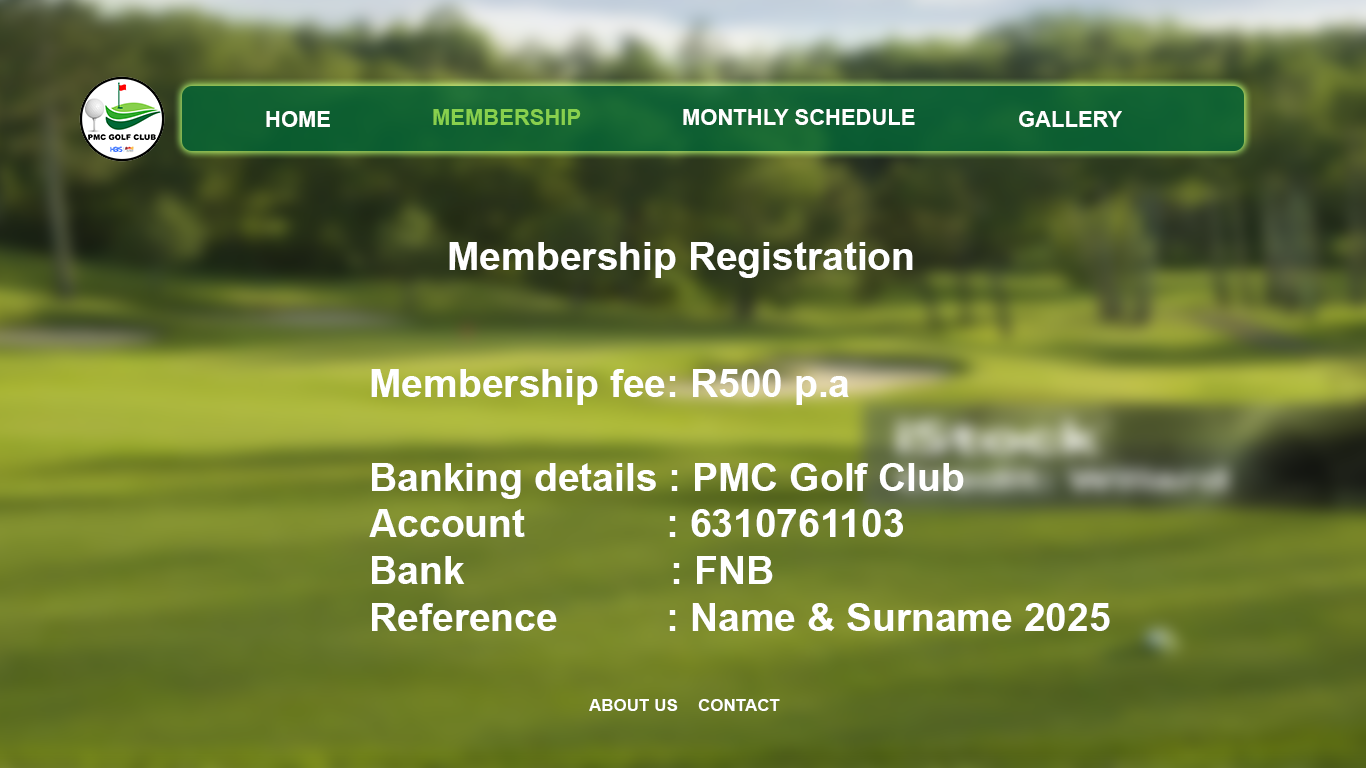
<style>
.page{position:relative;width:1366px;height:768px}
.page>*{position:absolute;margin:0}
.t1{font:22px "Arial-BoldMT";color:#ffffff}
.t2{font:22px "Arial-BoldMT";color:#88d04d}
.t3{font:39px "Arial-BoldMT";color:#ffffff}
.t4{font:17px "Arial-BoldMT";color:#ffffff}
</style>
<div class="page">
<p class="t1" style="left:266px;top:111px;width:64px;height:16px">HOME</p>
<p class="t2" style="left:433px;top:109px;width:148px;height:16px">MEMBERSHIP</p>
<p class="t1" style="left:683px;top:109px;width:232px;height:16px">MONTHLY SCHEDULE</p>
<p class="t1" style="left:1019px;top:111px;width:103px;height:16px">GALLERY</p>
<p class="t3" style="left:449px;top:242px;width:464px;height:36px">Membership Registration</p>
<p class="t3" style="left:369px;top:369px;width:741px;height:262px">Membership fee: R500 p.a<br><br>Banking details : PMC Golf Club<br>Account             : 6310761103<br>Bank                   : FNB<br>Reference          : Name &amp; Surname 2025</p>
<p class="t4" style="left:589px;top:699px;width:89px;height:12px">ABOUT US</p>
<p class="t4" style="left:698px;top:699px;width:82px;height:12px">CONTACT</p>
</div>
